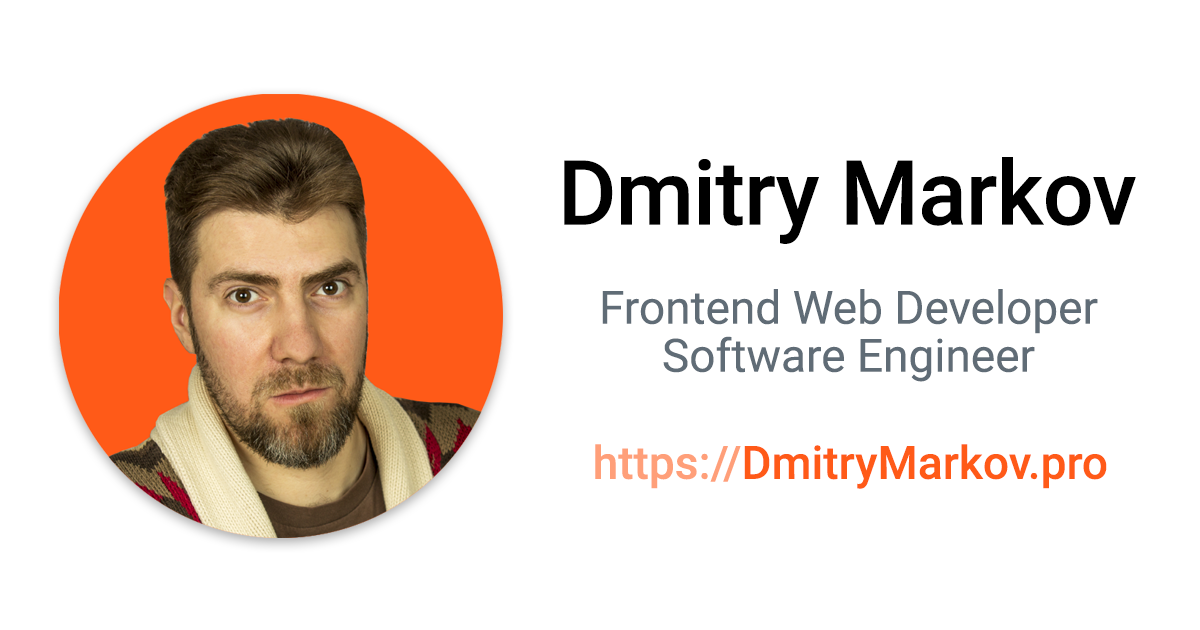
<style>
.page{position:relative;width:1200px;height:630px;background:#ffffff}
.page>*{position:absolute;margin:0}
.t1{font:90px "Roboto-Medium";letter-spacing:-0.01em;color:#000000}
.t2{font:46px/48px "Roboto-Regular";color:#606c76}
.t3{font:46px "Roboto-Medium";color:#ff5a18}
.t4{font:46px "Roboto-Medium";color:#ff9f79}
</style>
<div class="page">
<p class="t1" style="left:564px;top:157px;width:572px;height:87px">Dmitry Markov</p>
<p class="t2" style="left:602px;top:289px;width:496px;height:93px;text-align:center">Frontend Web Developer<br>Software Engineer</p>
<p class="t3" style="left:595px;top:444px;width:512px;height:45px"><span class="t4">https://</span>DmitryMarkov.pro</p>
</div>
